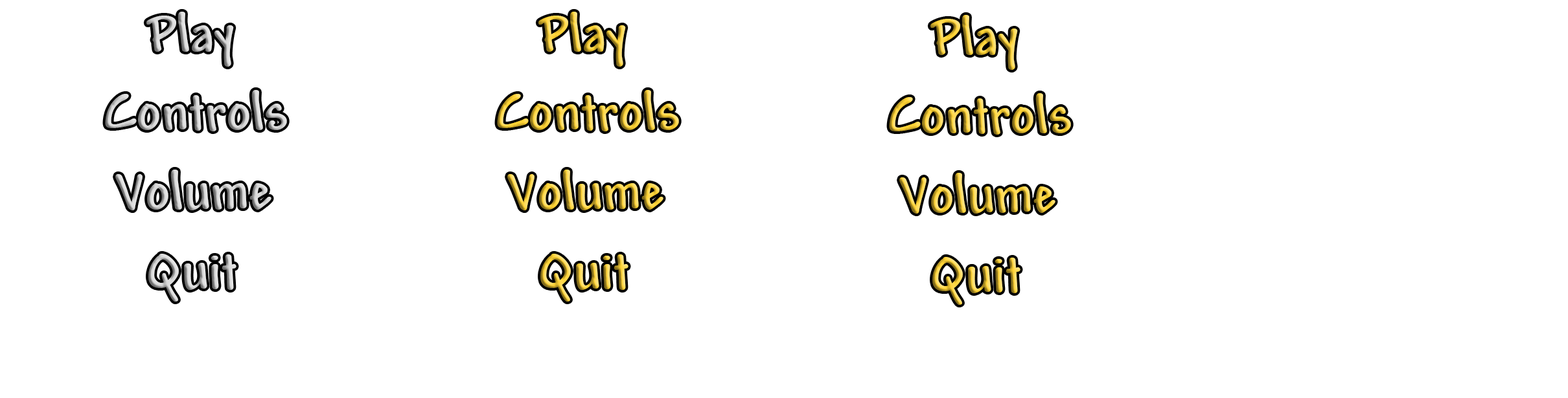
<style>
.page{position:relative;width:1568px;height:398px;background:#ffffff}
.page>*{position:absolute;margin:0}
.t1{font:57.7px "Andy-Bold"}
</style>
<div class="page">
<p class="t1" style="left:538px;top:12px;width:88px;height:55px">Play</p>
<p class="t1" style="left:930px;top:15px;width:88px;height:55px">Play</p>
<p class="t1" style="left:497px;top:90px;width:182px;height:42px">Controls</p>
<p class="t1" style="left:889px;top:93px;width:182px;height:42px">Controls</p>
<p class="t1" style="left:507px;top:170px;width:156px;height:41px">Volume</p>
<p class="t1" style="left:899px;top:173px;width:156px;height:41px">Volume</p>
<p class="t1" style="left:540px;top:254px;width:88px;height:48px">Quit</p>
<p class="t1" style="left:932px;top:257px;width:88px;height:48px">Quit</p>
</div>
